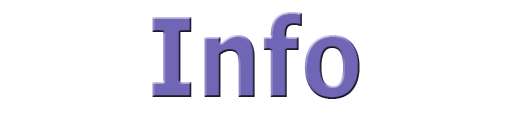
<style>
.page{position:relative;width:512px;height:128px;background:#ffffff}
.page>*{position:absolute;margin:0}
.t1{font:109.7px "Verdana-Bold";color:#7166b5;scale:0.83 1}
</style>
<div class="page">
<p class="t1" style="left:152px;top:12px;width:208px;height:87px">Info</p>
</div>
